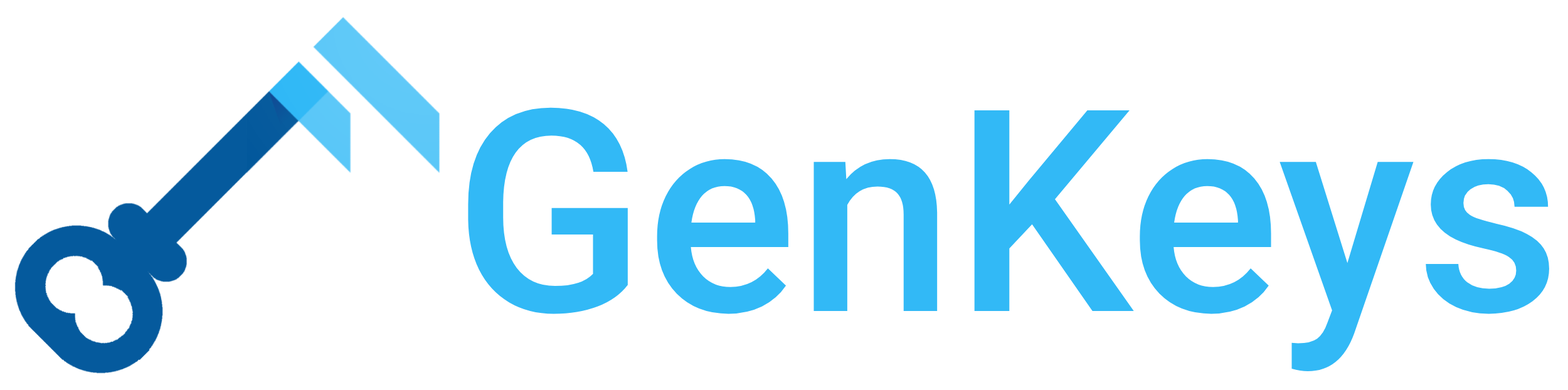
<style>
.page{position:relative;width:1568px;height:390px;background:#ffffff}
.page>*{position:absolute;margin:0}
.t1{font:282.2px "Roboto-Medium";color:#32b9f6}
</style>
<div class="page">
<p class="t1" style="left:468px;top:107px;width:1081px;height:265px">GenKeys</p>
</div>
